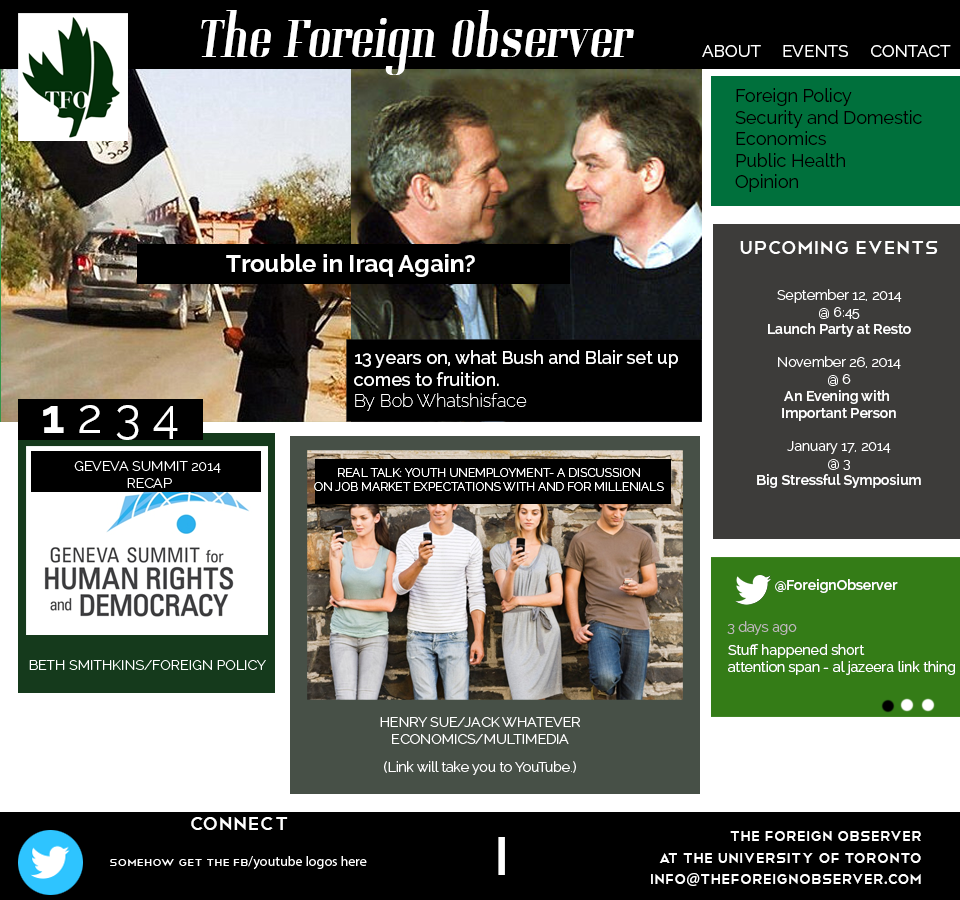
<style>
.page{position:relative;width:960px;height:900px;background:#000000}
.page>*{position:absolute;margin:0}
.t1{font:60px "Gladifilthefte";color:#ffffff}
.t2{font:17px "Raleway-Regular";color:#ffffff}
.t3{font:18px "Raleway-Regular";color:#000000}
.t4{font:24px "Telegrafico";color:#ffffff}
.t5{font:24px "Raleway-Bold";color:#ffffff}
.t6{font:14px "Raleway-SemiBold";color:#ffffff}
.t7{font:14px "Raleway-Light";color:#ffffff}
.t8{font:18px "Raleway-Medium";color:#ffffff}
.t9{font:18px "Raleway-Thin";color:#ffffff}
.t10{font:48px "Raleway-Regular";color:#ffffff}
.t11{font:48px "Raleway-Bold";color:#ffffff}
.t12{font:12px "Raleway-Light";color:#ffffff}
.t13{font:14px "Raleway-Light";color:#beb9b9}
.t14{font:14px "Raleway-Regular";color:#ffffff}
.t15{font:18px "Telegrafico";color:#ffffff}
.t16{font:18px "MyriadPro-Regular";color:#ffffff}
.t17{font:72px "Telegrafico";color:#ffffff}
</style>
<div class="page">
<p class="t1" style="left:201px;top:10px;width:433px;height:65px">The Foreign Observer</p>
<p class="t2" style="left:702px;top:45px;width:249px;height:12px">ABOUT     EVENTS     CONTACT</p>
<p class="t3" style="left:735px;top:88px;width:187px;height:104px">Foreign Policy<br>Security and Domestic<br>Economics<br>Public Health<br>Opinion</p>
<p class="t4" style="left:740px;top:241px;width:198px;height:13px">UPCOMING EVENTS</p>
<p class="t5" style="left:226px;top:254px;width:249px;height:23px">Trouble in Iraq Again?</p>
<p class="t6" style="left:757px;top:289px;width:164px;height:199px;text-align:center"><span class="t7">September 12, 2014<br>@ 6:45<br></span>Launch Party at Resto<br><span class="t7"><br>November 26, 2014<br>@ 6<br></span>An Evening with <br>Important Person<br><br><span class="t7">January 17, 2014<br>@ 3<br></span>Big Stressful Symposium</p>
<p class="t8" style="left:354px;top:350px;width:324px;height:61px">13 years on, what Bush and Blair set up <br>comes to fruition.<br><span class="t9">By Bob Whatshisface</span></p>
<p class="t10" style="left:43px;top:405px;width:135px;height:35px"><span class="t11">1</span> 2 3 4</p>
<p class="t12" style="left:314px;top:468px;width:350px;height:23px;text-align:center">REAL TALK: YOUTH UNEMPLOYMENT- A DISCUSSION<br>ON JOB MARKET EXPECTATIONS WITH AND FOR MILLENIALS</p>
<p class="t6" style="left:775px;top:579px;width:123px;height:14px">@ForeignObserver</p>
<p class="t13" style="left:727px;top:621px;width:70px;height:14px">3 days ago</p>
<p class="t14" style="left:728px;top:644px;width:227px;height:31px">Stuff happened short <br>attention span - al jazeera link thing</p>
<p class="t7" style="left:380px;top:717px;width:200px;height:27px;text-align:center">HENRY SUE/JACK WHATEVER<br>ECONOMICS/MULTIMEDIA</p>
<p class="t7" style="left:384px;top:761px;width:192px;height:14px">(Link will take you to YouTube.)</p>
<p class="t4" style="left:191px;top:817px;width:97px;height:13px">connect</p>
<p class="t15" style="left:651px;top:831px;width:270px;height:55px;text-align:right">the foreign observer<br>at the university of toronto<br>info<span class="t16">@</span>theforeignobserver<span class="t16">.</span>com</p>
<p class="t17" style="left:498px;top:837px;width:7px;height:38px">I</p>
</div>
